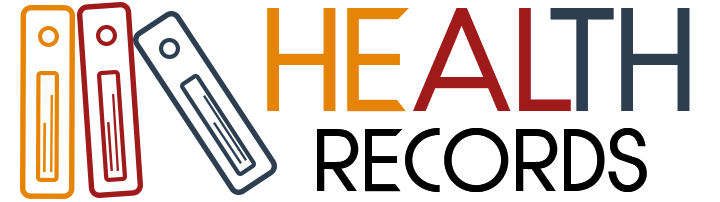
<style>
.page{position:relative;width:720px;height:202px;background:#ffffff}
.page>*{position:absolute;margin:0}
.t1{font:137.5px "Quinfo-Bold";letter-spacing:0.03em;color:#e58406}
.t2{font:137.5px "Quinfo-Bold";letter-spacing:0.03em;color:#9f1a1a}
.t3{font:137.5px "Quinfo-Bold";letter-spacing:0.03em;color:#2c3e50}
.t4{font:83.3px "Quinfo-Bold";letter-spacing:0.03em;color:#000000}
</style>
<div class="page">
<p class="t1" style="left:267px;top:8px;width:423px;height:104px">HE<span class="t2">AL</span><span class="t3">TH</span></p>
<p class="t4" style="left:317px;top:128px;width:330px;height:65px">RECORDS</p>
</div>
